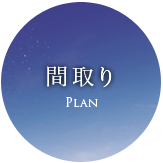
<style>
.page{position:relative;width:163px;height:163px;background:#ffffff}
.page>*{position:absolute;margin:0}
.t1{font:22px "HiraMinProN-W3";letter-spacing:0.18em;color:#ffffff}
.t2{font:12.5px "TrajanPro-Regular";letter-spacing:0.02em;color:#ffffff;scale:0.95 1}
</style>
<div class="page">
<p class="t1" style="left:47px;top:66px;width:65px;height:22px">間取り</p>
<p class="t2" style="left:66px;top:97px;width:32px;height:10px">Plan</p>
</div>
